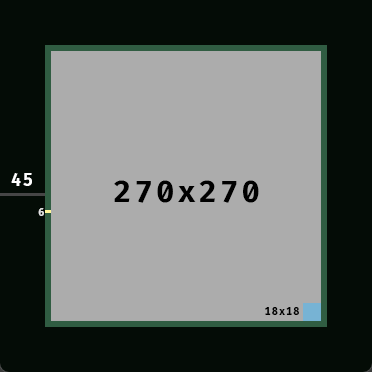
<style>
.page{position:relative;width:372px;height:372px;background:#acacac}
.page>*{position:absolute;margin:0}
.t1{font:16.7px "FiraCodeNerdFontComplete-Bold";letter-spacing:0.1em;color:#ffffff}
.t2{font:30px "FiraCodeNerdFontComplete-Bold";letter-spacing:0.1em;color:#000000}
.t3{font:10px "FiraCodeNerdFontComplete-Bold";letter-spacing:0.1em;color:#e4e4e4}
.t4{font:10px "FiraCodeNerdFontComplete-Bold";letter-spacing:0.1em;color:#000000}
</style>
<div class="page">
<p class="t1" style="left:11px;top:173px;width:21px;height:13px">45</p>
<p class="t2" style="left:114px;top:180px;width:145px;height:23px">270x270</p>
<p class="t3" style="left:38px;top:208px;width:6px;height:8px">6</p>
<p class="t4" style="left:265px;top:307px;width:34px;height:8px">18x18</p>
</div>
